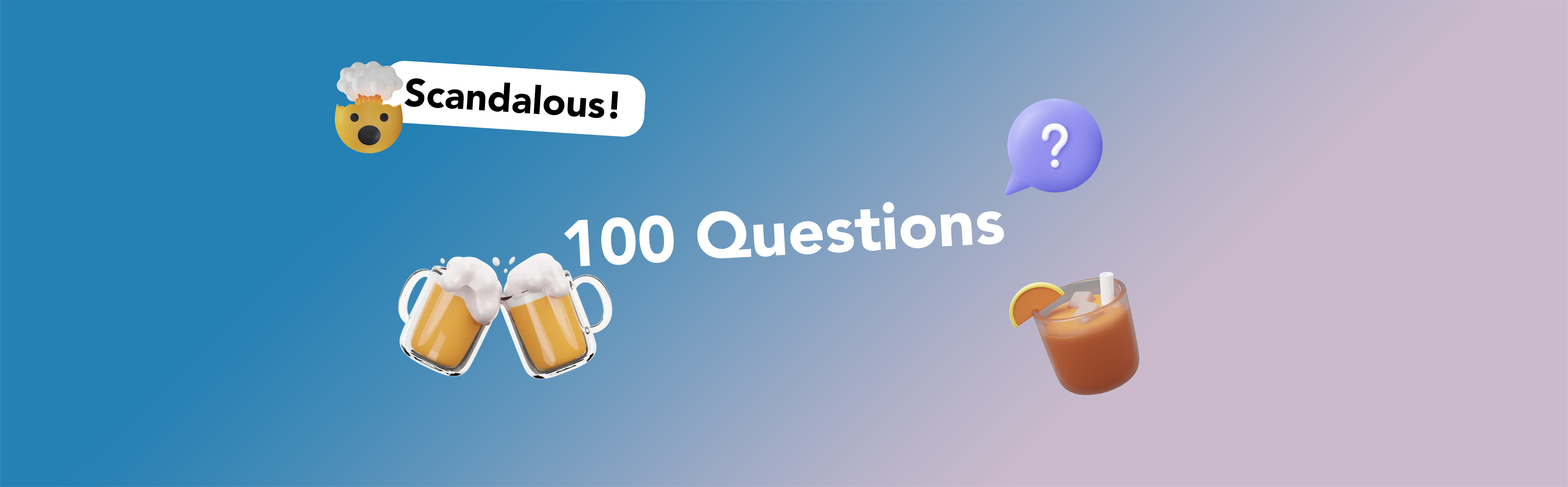
<style>
.page{position:relative;width:1568px;height:487px}
.page>*{position:absolute;margin:0}
.t1{font:38.5px "Avenir-Black";color:#000000}
.t2{font:64.9px "Avenir-Black";color:#ffffff}
</style>
<div class="page">
<p class="t1" style="left:404px;top:78px;width:214px;height:41px;rotate:4deg">Scandalous!</p>
<p class="t2" style="left:564px;top:202px;width:440px;height:64px;rotate:-3deg">100 Questions</p>
</div>
